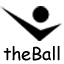
<style>
.page{position:relative;width:64px;height:64px;background:#ffffff}
.page>*{position:absolute;margin:0}
.t1{font:17.5px "ComicSansMS";color:#000000}
</style>
<div class="page">
<p class="t1" style="left:3px;top:46px;width:57px;height:15px">theBall</p>
</div>
